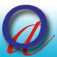
<style>
.page{position:relative;width:57px;height:57px}
.page>*{position:absolute;margin:0}
.t1{font:52px "Zapfino"}
</style>
<div class="page">
<p class="t1" style="left:7px;top:20px;width:48px;height:36px">a</p>
</div>
